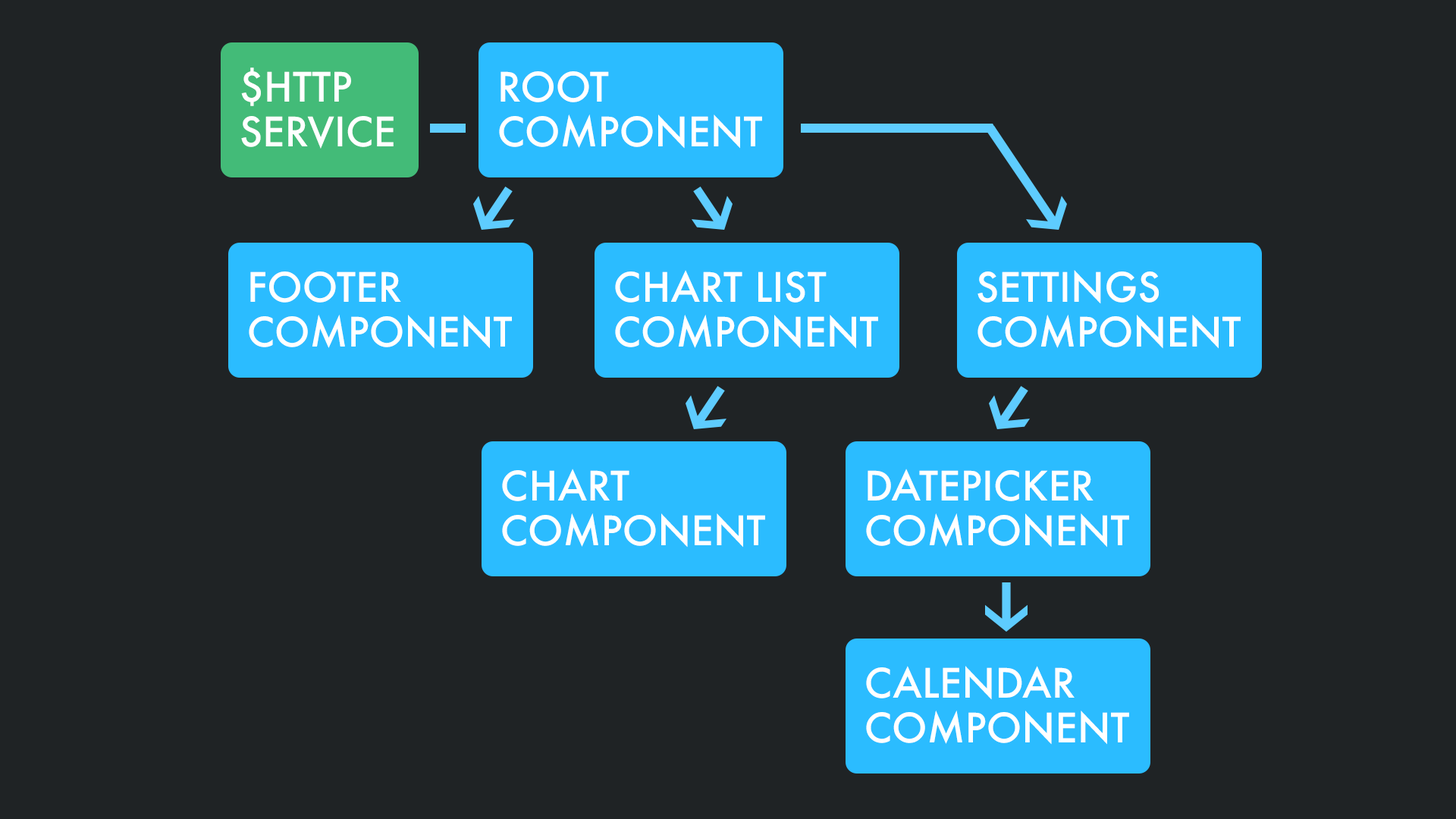
<style>
.page{position:relative;width:1456px;height:819px;background:#1f2325}
.page>*{position:absolute;margin:0}
.t1{font:39.5px/44.6px "Futura-Medium";color:#ffffff}
</style>
<div class="page">
<p class="t1" style="left:241px;top:67px;width:153px;height:82px">$HTTP<br>SERVICE</p>
<p class="t1" style="left:499px;top:71px;width:263px;height:78px">ROOT<br>COMPONENT</p>
<p class="t1" style="left:615px;top:270px;width:263px;height:79px">CHART LIST<br>COMPONENT</p>
<p class="t1" style="left:977px;top:270px;width:264px;height:79px">SETTINGS<br>COMPONENT</p>
<p class="t1" style="left:249px;top:271px;width:263px;height:78px">FOOTER<br>COMPONENT</p>
<p class="t1" style="left:502px;top:469px;width:263px;height:79px">CHART<br>COMPONENT</p>
<p class="t1" style="left:866px;top:469px;width:263px;height:79px">DATEPICKER<br>COMPONENT</p>
<p class="t1" style="left:866px;top:666px;width:263px;height:79px">CALENDAR<br>COMPONENT</p>
</div>
